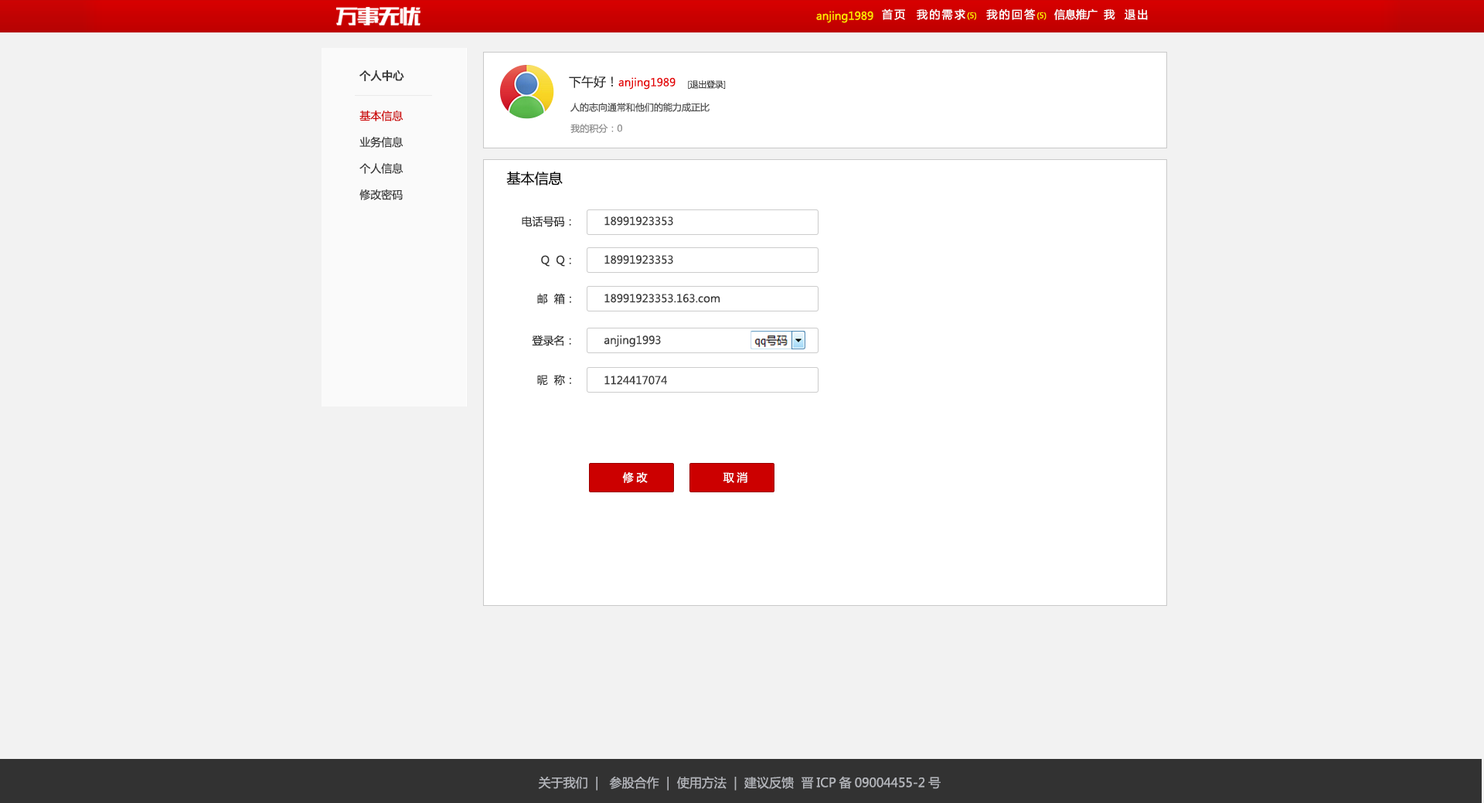
<style>
.page{position:relative;width:1484px;height:803px;background:#f2f2f2}
.page>*{position:absolute;margin:0}
.t1{font:10.8px "MicrosoftYaHei";color:#fee300}
.t2{font:10.8px "MicrosoftYaHei";letter-spacing:0.16em;color:#ffffff}
.t3{font:7.7px "MicrosoftYaHei";color:#fff600}
.t4{font:10.8px "MicrosoftYaHei";color:#ffffff}
.t5{font:10.8px "MicrosoftYaHei";color:#3a3a3a;font-weight:bold}
.t6{font:10.8px "MicrosoftYaHei";color:#e40002}
.t7{font:12.4px "MicrosoftYaHei";color:#2f2f2f}
.t8{font:8.5px "MicrosoftYaHei";letter-spacing:-0.02em;color:#3e3e3e}
.t9{font:10.8px/26.3px "MicrosoftYaHei";color:#3a3a3a}
.t10{font:10.8px/26.3px "MicrosoftYaHei";color:#cc0000}
.t11{font:9.3px "MicrosoftYaHei";color:#4f4f4f}
.t12{font:9.3px "MicrosoftYaHei";color:#8f8f8f}
.t13{font:13.9px "MicrosoftYaHei";color:#060606}
.t14{font:10.8px "MicrosoftYaHei";color:#333333}
.t15{font:10.8px "MicrosoftYaHei";color:#3c3c3c}
.t16{font:10.8px "MicrosoftYaHei";letter-spacing:0.26em;color:#ffffff}
.t17{font:12.4px "MicrosoftYaHei";color:#b3b5ba}
</style>
<div class="page">
<p class="t1" style="left:816px;top:11px;width:58px;height:12px">anjing1989</p>
<p class="t2" style="left:882px;top:9px;width:266px;height:11px">首页  我的需求<span class="t3">(5)</span>  我的回答<span class="t3">(5)  </span><span class="t4"> 信息推广  我</span>  退出</p>
<p class="t5" style="left:360px;top:70px;width:44px;height:11px">个人中心</p>
<p class="t6" style="left:569px;top:76px;width:107px;height:14px"><span class="t7">下午好！</span>anjing1989</p>
<p class="t8" style="left:688px;top:80px;width:38px;height:9px">[退出登录]</p>
<p class="t9" style="left:360px;top:111px;width:44px;height:89px"><span class="t10">基本信息<br></span>业务信息<br>个人信息<br>修改密码</p>
<p class="t11" style="left:571px;top:102px;width:139px;height:10px">人的志向通常和他们的能力成正比</p>
<p class="t12" style="left:571px;top:124px;width:51px;height:10px">我的积分：0</p>
<p class="t13" style="left:506px;top:172px;width:57px;height:14px">基本信息</p>
<p class="t14" style="left:522px;top:216px;width:49px;height:11px">电话号码：</p>
<p class="t15" style="left:605px;top:216px;width:68px;height:10px">18991923353</p>
<p class="t14" style="left:541px;top:255px;width:30px;height:12px">Q  Q：</p>
<p class="t15" style="left:605px;top:255px;width:68px;height:9px">18991923353</p>
<p class="t14" style="left:537px;top:293px;width:34px;height:12px">邮  箱：</p>
<p class="t15" style="left:605px;top:294px;width:116px;height:9px">18991923353.163.com</p>
<p class="t14" style="left:532px;top:335px;width:39px;height:11px">登录名：</p>
<p class="t15" style="left:604px;top:336px;width:57px;height:11px">anjing1993</p>
<p class="t14" style="left:537px;top:374px;width:34px;height:12px">昵  称：</p>
<p class="t15" style="left:605px;top:376px;width:62px;height:9px">1124417074</p>
<p class="t16" style="left:622px;top:472px;width:26px;height:11px">修改</p>
<p class="t16" style="left:723px;top:472px;width:25px;height:11px">取消</p>
<p class="t17" style="left:538px;top:776px;width:403px;height:15px">关于我们  |   参股合作  |  使用方法  |  建议反馈  晋ICP备09004455-2号</p>
</div>
